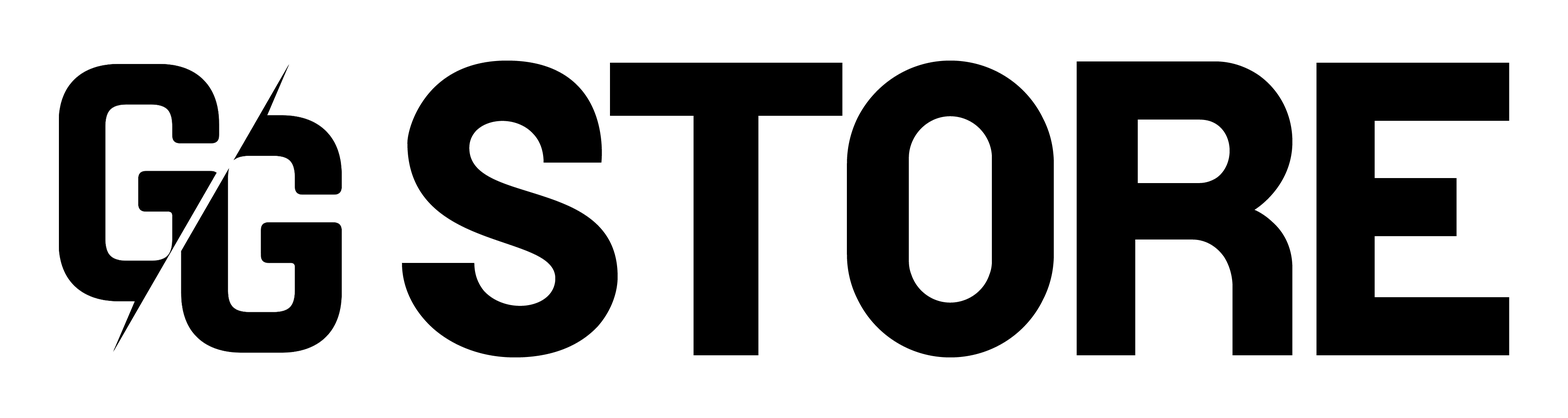
<style>
.page{position:relative;width:1568px;height:418px;background:#ffffff}
.page>*{position:absolute;margin:0}
.t1{font:417.8px "HotelDeParisXe";letter-spacing:-0.025em;color:#000000}
</style>
<div class="page">
<p class="t1" style="left:402px;top:61px;width:1108px;height:296px">STORE</p>
</div>
